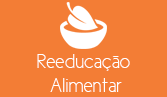
<style>
.page{position:relative;width:167px;height:97px;background:#f37d35}
.page>*{position:absolute;margin:0}
.t1{font:20px "CicleFina";color:#ffffff}
</style>
<div class="page">
<p class="t1" style="left:37px;top:54px;width:93px;height:38px;text-align:center">Reeducação <br>Alimentar</p>
</div>
